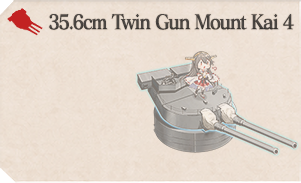
<style>
.page{position:relative;width:301px;height:183px}
.page>*{position:absolute;margin:0}
.t1{font:20px "MatissePro-B";letter-spacing:-0.08em;color:#4e4945;scale:0.9 1}
</style>
<div class="page">
<p class="t1" style="left:49px;top:14px;width:245px;height:16px">35.6cm Twin Gun Mount Kai 4</p>
</div>
